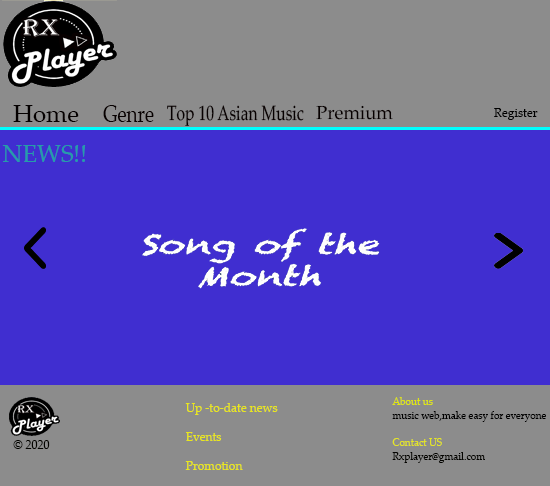
<style>
.page{position:relative;width:550px;height:486px;background:#402ed0}
.page>*{position:absolute;margin:0}
.t1{font:24px "PalatinoLinotype-Roman";color:#040000}
.t2{font:24px "PalatinoLinotype-Roman";color:#060000;scale:0.79 1}
.t3{font:20.7px "PalatinoLinotype-Roman";color:#060000;scale:0.75 1}
.t4{font:19px "PalatinoLinotype-Roman";color:#060000}
.t5{font:12px "PalatinoLinotype-Roman";color:#000000}
.t6{font:24px "PalatinoLinotype-Roman";color:#269ca9}
.t7{font:11.3px "PalatinoLinotype-Roman";color:#000000;scale:0.88 1}
.t8{font:11.3px "PalatinoLinotype-Roman";color:#e1e809;scale:0.88 1}
.t9{font:11.3px "PalatinoLinotype-Roman";color:#e5e522;scale:0.88 1}
.t10{font:11.3px "PalatinoLinotype-Roman";color:#030300;scale:0.88 1}
.t11{font:12px "PalatinoLinotype-Roman";color:#eae71a}
.t12{font:12px "PalatinoLinotype-Roman";color:#030300}
</style>
<div class="page">
<p class="t1" style="left:13px;top:105px;width:66px;height:17px">Home</p>
<p class="t2" style="left:103px;top:105px;width:51px;height:17px">Genre</p>
<p class="t3" style="left:167px;top:105px;width:137px;height:21px">Top 10 Asian Music</p>
<p class="t4" style="left:316px;top:105px;width:77px;height:15px">Premium</p>
<p class="t5" style="left:494px;top:108px;width:44px;height:12px">Register</p>
<p class="t6" style="left:2px;top:145px;width:84px;height:17px">NEWS!!</p>
<p class="t7" style="left:392px;top:397px;width:154px;height:66px"><span class="t8">About us<br></span>music web,make easy for everyone<br><br><span class="t9">Contact US<br></span><span class="t10">Rxplayer@gmail.com</span></p>
<p class="t11" style="left:185px;top:403px;width:93px;height:67px">Up -to-date news <br><br>Events <br><br>Promotion</p>
<p class="t12" style="left:13px;top:440px;width:37px;height:9px">© 2020</p>
</div>
